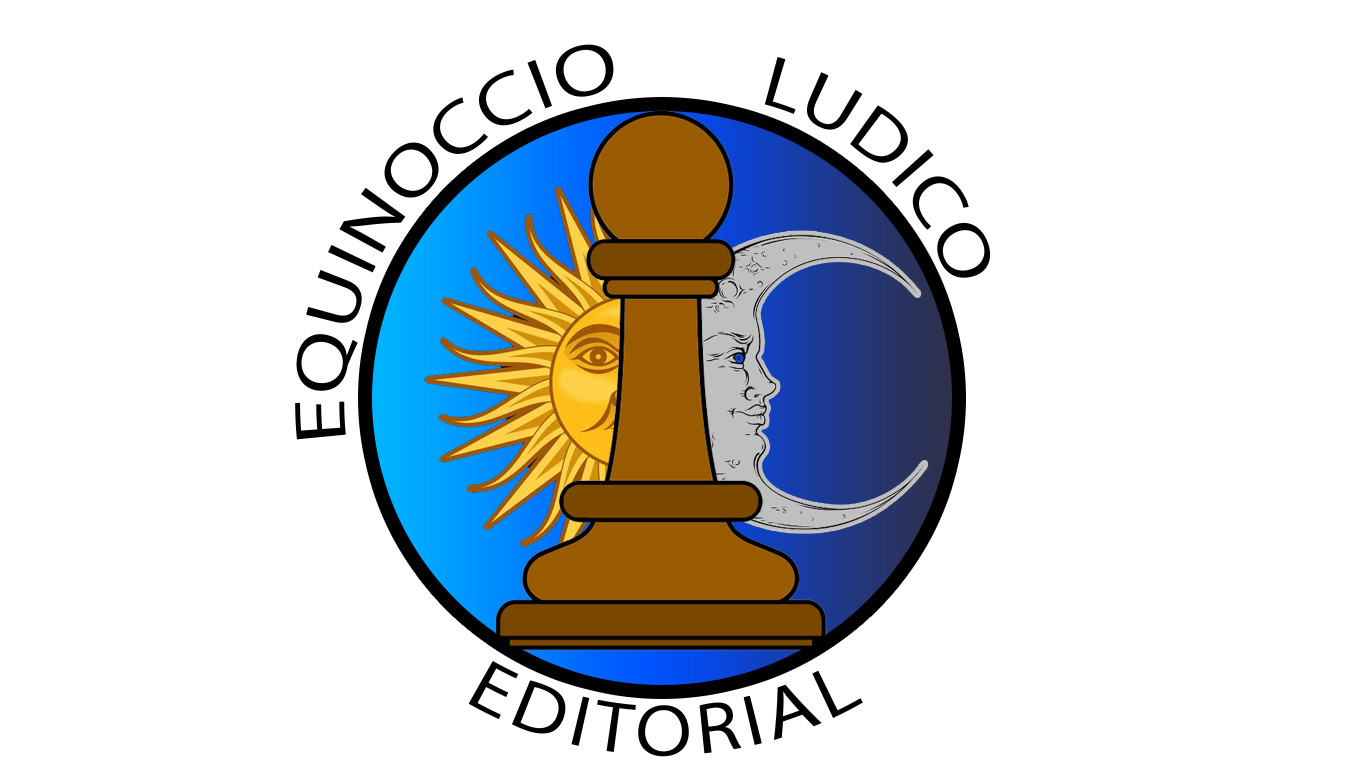
<style>
.page{position:relative;width:1366px;height:768px;background:#ffffff}
.page>*{position:absolute;margin:0}
.t1{font:72px "MyriadPro-Regular";letter-spacing:0.04em;color:#000000}
</style>
<div class="page">
<p class="t1" style="left:295px;top:44px;width:319px;height:396px;rotate:-52deg">EQUINOCCIO</p>
<p class="t1" style="left:764px;top:57px;width:227px;height:221px;rotate:44deg">LUDICO</p>
<p class="t1" style="left:468px;top:661px;width:395px;height:96px">EDITORIAL</p>
</div>
